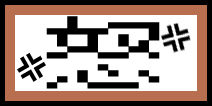
<style>
.page{position:relative;width:212px;height:106px;background:#ffffff}
.page>*{position:absolute;margin:0}
.t1{font:72px "PixelMplus12-Regular";color:#000000;scale:1.7 1}
</style>
<div class="page">
<p class="t1" style="left:46px;top:16px;width:114px;height:73px">怒</p>
</div>
